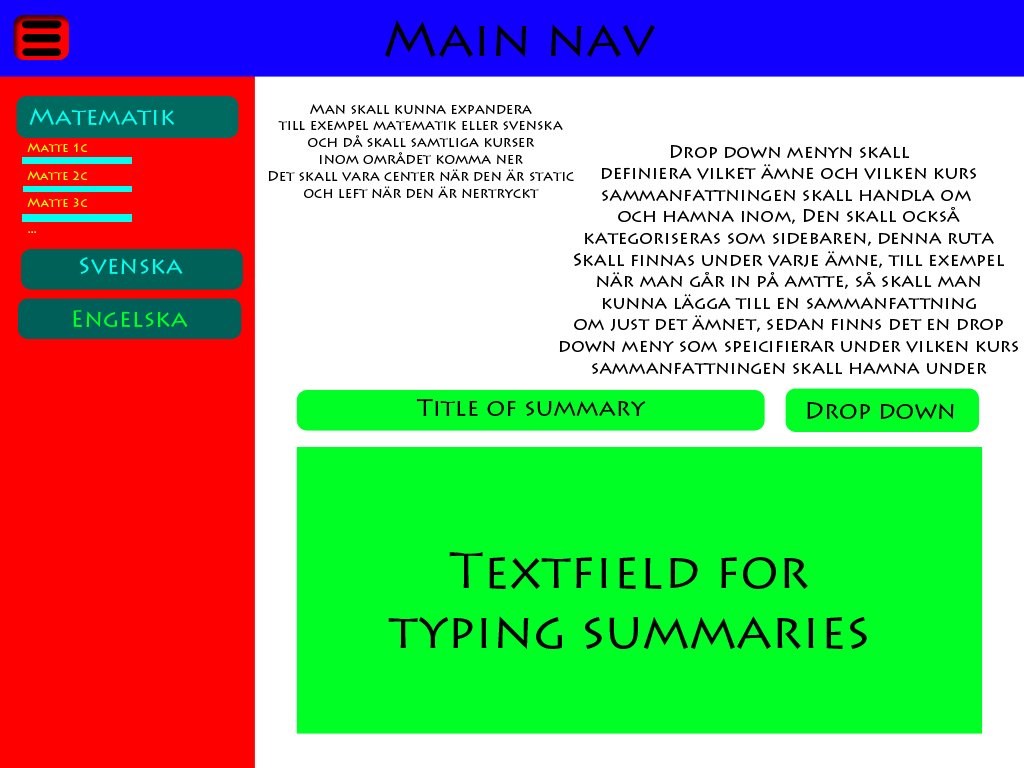
<style>
.page{position:relative;width:1024px;height:768px;background:#ffffff}
.page>*{position:absolute;margin:0}
.t1{font:50px "LithosPro-Regular";color:#000000}
.t2{font:24px "LithosPro-Regular";color:#00fff0}
.t3{font:14px "LithosPro-Regular";color:#000000}
.t4{font:12px "LithosPro-Regular";color:#fcff00}
.t5{font:18px "LithosPro-Regular";color:#000000}
.t6{font:24px "LithosPro-Regular";color:#00ff24}
.t7{font:24px "LithosPro-Regular";color:#000000}
</style>
<div class="page">
<p class="t1" style="left:385px;top:20px;width:270px;height:37px">Main nav</p>
<p class="t2" style="left:29px;top:108px;width:146px;height:17px">Matematik</p>
<p class="t3" style="left:269px;top:104px;width:305px;height:94px;text-align:center">Man skall kunna expandera<br>till exempel matematik eller svenska<br>och då skall samtliga kurser<br>inom området komma ner<br>Det skall vara center när den är static<br>och left när den är nertryckt</p>
<p class="t4" style="left:27px;top:143px;width:61px;height:9px">Matte 1c</p>
<p class="t5" style="left:559px;top:145px;width:459px;height:229px;text-align:center">Drop down menyn skall<br>definiera vilket ämne och vilken kurs<br>sammanfattningen skall handla om <br>och hamna inom, Den skall också<br>kategoriseras som sidebaren, denna ruta<br>Skall finnas under varje ämne, till exempel<br>när man går in på amtte, så skall man<br>kunna lägga till en sammanfattning<br>om just det ämnet, sedan finns det en drop<br>down meny som speicifierar under vilken kurs<br>sammanfattningen skall hamna under</p>
<p class="t4" style="left:27px;top:171px;width:61px;height:9px">Matte 2c</p>
<p class="t4" style="left:27px;top:198px;width:61px;height:9px">Matte 3c</p>
<p class="t4" style="left:28px;top:231px;width:8px;height:2px">...</p>
<p class="t2" style="left:80px;top:257px;width:103px;height:18px">Svenska</p>
<p class="t6" style="left:73px;top:310px;width:115px;height:17px">Engelska</p>
<p class="t7" style="left:416px;top:399px;width:230px;height:17px">Title of summary</p>
<p class="t7" style="left:807px;top:402px;width:147px;height:18px">Drop down</p>
<p class="t1" style="left:388px;top:552px;width:479px;height:97px;text-align:center">Textfield for<br>typing summaries</p>
</div>
